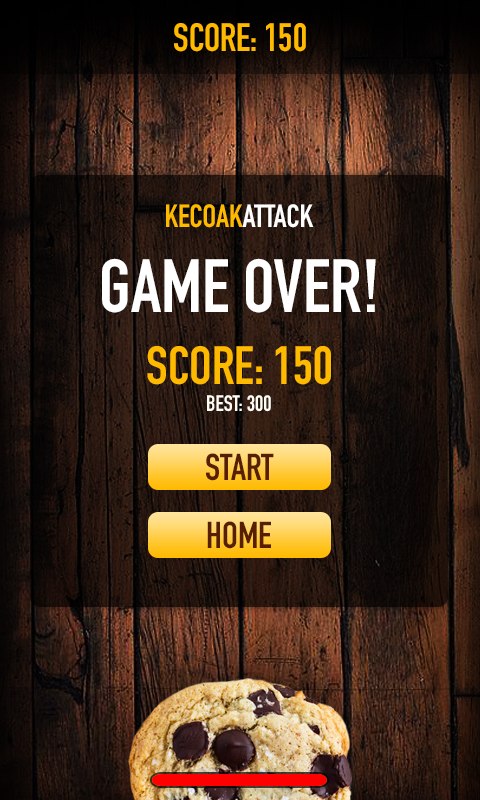
<style>
.page{position:relative;width:480px;height:800px}
.page>*{position:absolute;margin:0}
.t1{font:39px "DINCondensed-Bold";color:#ffba00}
.t2{font:31.7px "DINCondensed-Bold";color:#ffba00}
.t3{font:31.7px "DINCondensed-Bold";color:#ffffff}
.t4{font:73.9px "DINCondensed-Bold";color:#ffffff}
.t5{font:52.9px "DINCondensed-Bold";color:#ffba00}
.t6{font:22px "DINCondensed-Bold";color:#fffdf6}
.t7{font:36.9px "DINCondensed-Bold";color:#571f00}
</style>
<div class="page">
<p class="t1" style="left:174px;top:23px;width:132px;height:29px">SCORE: 150</p>
<p class="t2" style="left:166px;top:204px;width:148px;height:24px">KECOAK<span class="t3">ATTACK</span></p>
<p class="t4" style="left:102px;top:258px;width:274px;height:55px">GAME OVER!</p>
<p class="t5" style="left:147px;top:346px;width:184px;height:39px">SCORE: 150</p>
<p class="t6" style="left:207px;top:395px;width:64px;height:17px">BEST: 300</p>
<p class="t7" style="left:206px;top:453px;width:68px;height:28px">START</p>
<p class="t7" style="left:207px;top:521px;width:64px;height:28px">HOME</p>
</div>
